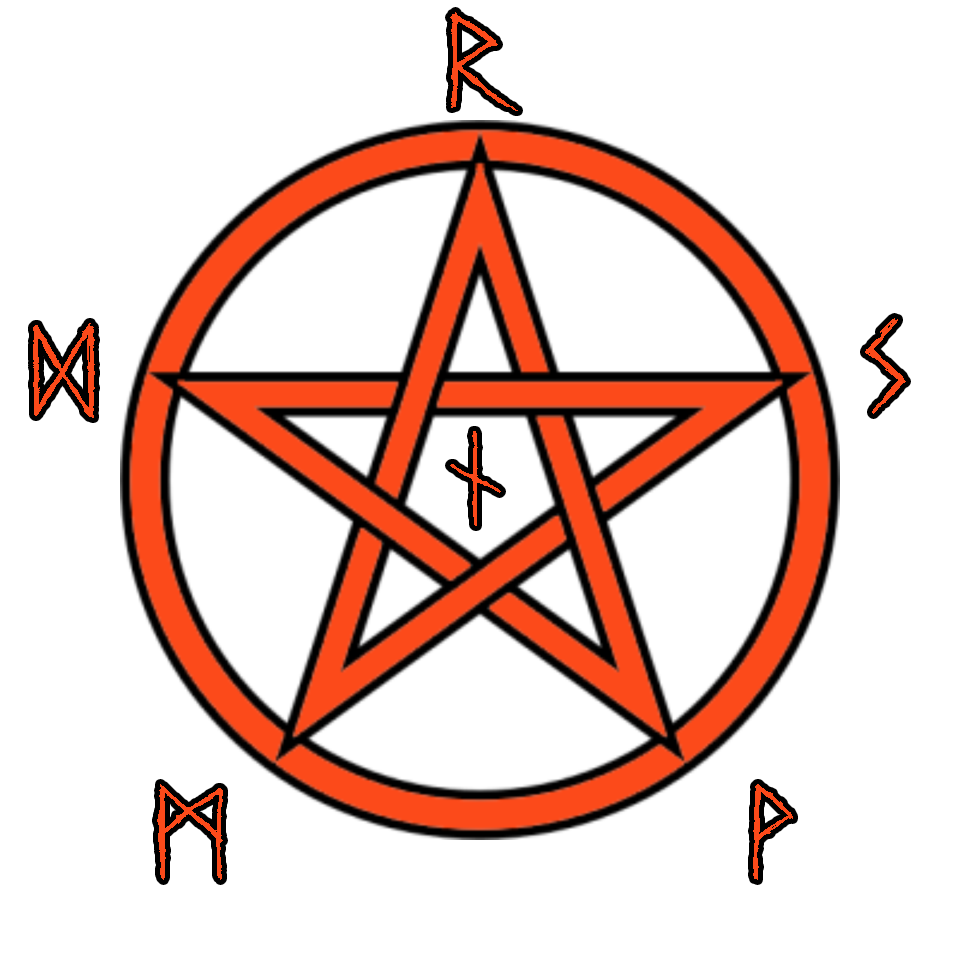
<style>
.page{position:relative;width:960px;height:960px;background:#ffffff}
.page>*{position:absolute;margin:0}
.t1{font:120px "UrnordiskaRunor";color:#fc4a1a}
</style>
<div class="page">
<p class="t1" style="left:450px;top:12px;width:68px;height:99px">R</p>
<p class="t1" style="left:865px;top:318px;width:41px;height:96px">s</p>
<p class="t1" style="left:33px;top:323px;width:62px;height:95px">d</p>
<p class="t1" style="left:450px;top:431px;width:51px;height:95px">n</p>
<p class="t1" style="left:157px;top:784px;width:66px;height:96px">m</p>
<p class="t1" style="left:753px;top:784px;width:40px;height:96px">w</p>
</div>
